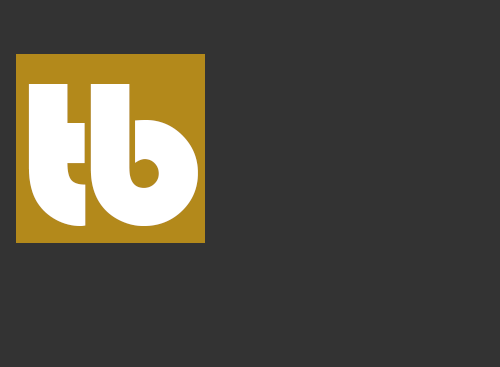
<style>
.page{position:relative;width:500px;height:367px;background:#333333}
.page>*{position:absolute;margin:0}
.t1{font:209.8px "Bauhaus93";color:#ffffff}
</style>
<div class="page">
<p class="t1" style="left:28px;top:84px;width:58px;height:142px">t</p>
<p class="t1" style="left:90px;top:84px;width:108px;height:142px">b</p>
</div>
